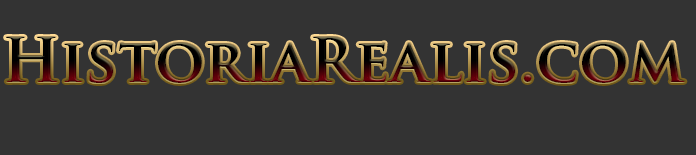
<style>
.page{position:relative;width:696px;height:155px;background:#333333}
.page>*{position:absolute;margin:0}
.t1{font:60px "TrajanPro-Bold";letter-spacing:0.01em}
</style>
<div class="page">
<p class="t1" style="left:6px;top:37px;width:679px;height:46px">HistoriaRealis.com</p>
</div>
